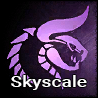
<style>
.page{position:relative;width:98px;height:98px}
.page>*{position:absolute;margin:0}
.t1{font:16px "Roboto-Medium";color:#ffffff;scale:1.2 1}
</style>
<div class="page">
<p class="t1" style="left:11px;top:75px;width:76px;height:15px">Skyscale</p>
</div>
